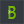
<style>
.page{position:relative;width:24px;height:24px;background:#33393f}
.page>*{position:absolute;margin:0}
.t1{font:17.6px "Tahoma";color:#76b901;scale:0.82 1}
</style>
<div class="page">
<p class="t1" style="left:8px;top:6px;width:8px;height:13px">B</p>
</div>
